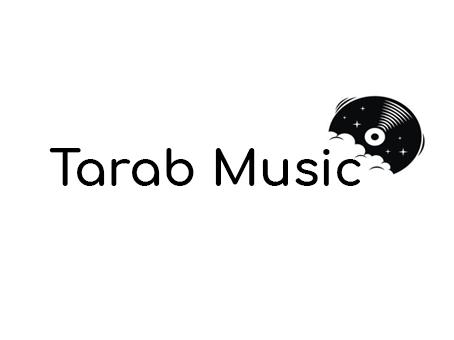
<style>
.page{position:relative;width:454px;height:340px;background:#ffffff}
.page>*{position:absolute;margin:0}
.t1{font:49.4px "Comfortaa-Bold";color:#000000}
</style>
<div class="page">
<p class="t1" style="left:49px;top:148px;width:312px;height:38px">Tarab Music</p>
</div>
